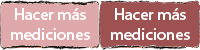
<style>
.page{position:relative;width:200px;height:50px;background:#9e5151}
.page>*{position:absolute;margin:0}
.t1{font:16.7px "MyriadHebrew-Regular";color:#ffffff}
</style>
<div class="page">
<p class="t1" style="left:11px;top:8px;width:79px;height:32px;text-align:center">Hacer más mediciones</p>
<p class="t1" style="left:111px;top:8px;width:79px;height:32px;text-align:center">Hacer más mediciones</p>
</div>
